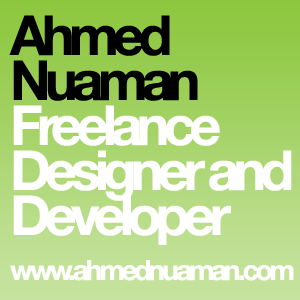
<style>
.page{position:relative;width:300px;height:300px}
.page>*{position:absolute;margin:0}
.t1{font:55px/45px "HelveticaNeue-Bold";letter-spacing:-0.11em;color:#ffffff}
.t2{font:55px/45px "HelveticaNeue-Bold";letter-spacing:-0.11em;color:#000000}
.t3{font:28px/45px "HelveticaNeue-Bold";letter-spacing:-0.11em;color:#ffffff}
</style>
<div class="page">
<p class="t1" style="left:9px;top:15px;width:285px;height:266px"><span class="t2">Ahmed <br>Nuaman<br></span>Freelance<br>Designer and<br>Developer<br><span class="t3">www.ahmednuaman.com</span></p>
</div>
